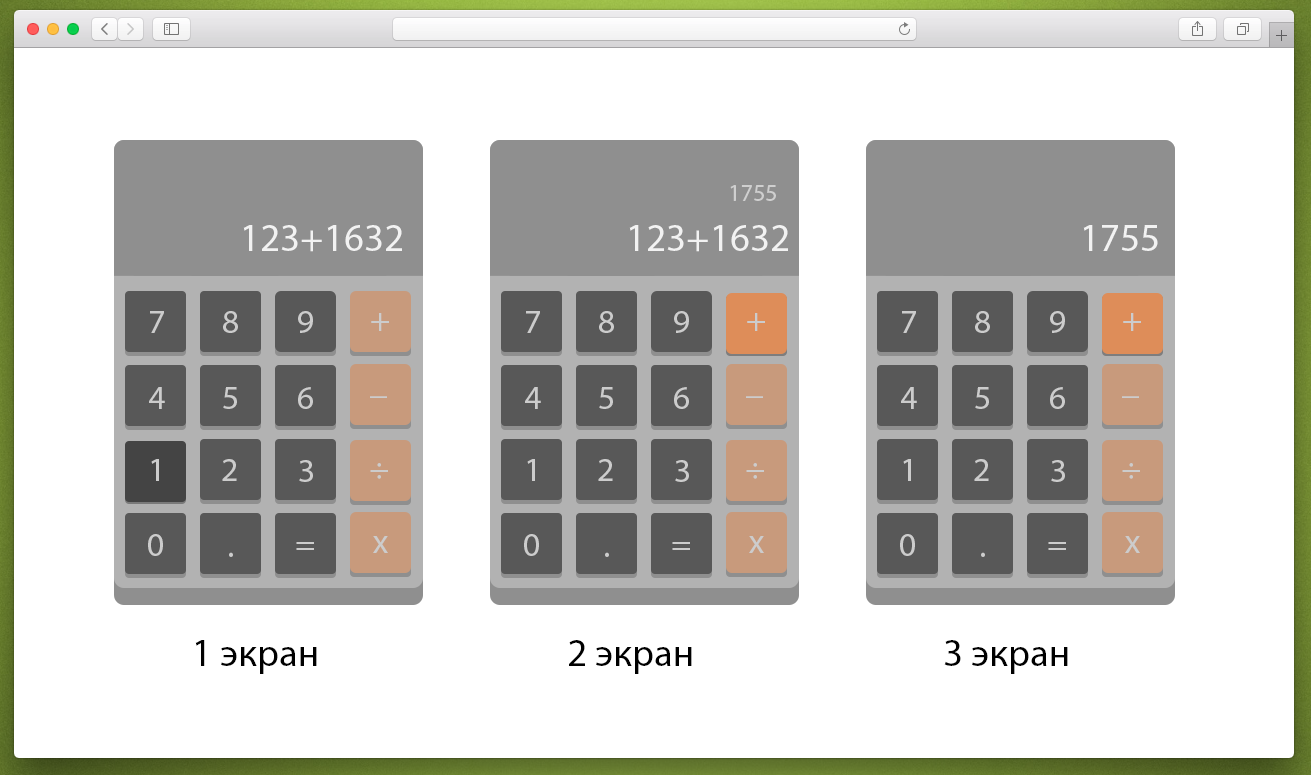
<style>
.page{position:relative;width:1311px;height:775px;background:#ffffff}
.page>*{position:absolute;margin:0}
.t1{font:24px "MyriadPro-Regular";color:#cfcfcf}
.t2{font:39px "MyriadPro-Regular";color:#f2f2f2}
.t3{font:34px "MyriadPro-Regular";color:#cccccc}
.t4{font:39px "MyriadPro-Regular";color:#000000}
</style>
<div class="page">
<p class="t1" style="left:730px;top:185px;width:46px;height:16px">1755</p>
<p class="t2" style="left:243px;top:225px;width:159px;height:27px">123+1632</p>
<p class="t2" style="left:629px;top:225px;width:159px;height:27px">123+1632</p>
<p class="t2" style="left:1083px;top:225px;width:75px;height:26px">1755</p>
<p class="t3" style="left:150px;top:311px;width:14px;height:22px">7</p>
<p class="t3" style="left:223px;top:311px;width:15px;height:22px">8</p>
<p class="t3" style="left:298px;top:311px;width:15px;height:22px">9</p>
<p class="t3" style="left:371px;top:313px;width:18px;height:18px">+</p>
<p class="t3" style="left:526px;top:311px;width:14px;height:22px">7</p>
<p class="t3" style="left:599px;top:311px;width:15px;height:22px">8</p>
<p class="t3" style="left:674px;top:311px;width:15px;height:22px">9</p>
<p class="t3" style="left:747px;top:313px;width:18px;height:18px">+</p>
<p class="t3" style="left:902px;top:311px;width:14px;height:22px">7</p>
<p class="t3" style="left:975px;top:311px;width:15px;height:22px">8</p>
<p class="t3" style="left:1050px;top:311px;width:15px;height:22px">9</p>
<p class="t3" style="left:1123px;top:313px;width:18px;height:18px">+</p>
<p class="t3" style="left:149px;top:387px;width:16px;height:22px">4</p>
<p class="t3" style="left:223px;top:387px;width:14px;height:22px">5</p>
<p class="t3" style="left:298px;top:387px;width:15px;height:22px">6</p>
<p class="t3" style="left:525px;top:387px;width:16px;height:22px">4</p>
<p class="t3" style="left:599px;top:387px;width:14px;height:22px">5</p>
<p class="t3" style="left:674px;top:387px;width:15px;height:22px">6</p>
<p class="t3" style="left:901px;top:387px;width:16px;height:22px">4</p>
<p class="t3" style="left:975px;top:387px;width:14px;height:22px">5</p>
<p class="t3" style="left:1050px;top:387px;width:15px;height:22px">6</p>
<p class="t3" style="left:370px;top:396px;width:17px;height:2px">_</p>
<p class="t3" style="left:746px;top:396px;width:17px;height:2px">_</p>
<p class="t3" style="left:1122px;top:396px;width:17px;height:2px">_</p>
<p class="t3" style="left:151px;top:459px;width:8px;height:22px">1</p>
<p class="t3" style="left:222px;top:459px;width:15px;height:22px">2</p>
<p class="t3" style="left:299px;top:460px;width:14px;height:22px">3</p>
<p class="t3" style="left:527px;top:459px;width:8px;height:22px">1</p>
<p class="t3" style="left:598px;top:459px;width:15px;height:22px">2</p>
<p class="t3" style="left:675px;top:460px;width:14px;height:22px">3</p>
<p class="t3" style="left:903px;top:459px;width:8px;height:22px">1</p>
<p class="t3" style="left:974px;top:459px;width:15px;height:22px">2</p>
<p class="t3" style="left:1051px;top:460px;width:14px;height:22px">3</p>
<p class="t3" style="left:370px;top:463px;width:18px;height:16px">÷</p>
<p class="t3" style="left:746px;top:463px;width:18px;height:16px">÷</p>
<p class="t3" style="left:1122px;top:463px;width:18px;height:16px">÷</p>
<p class="t3" style="left:148px;top:534px;width:15px;height:22px">0</p>
<p class="t3" style="left:524px;top:534px;width:15px;height:22px">0</p>
<p class="t3" style="left:900px;top:534px;width:15px;height:22px">0</p>
<p class="t3" style="left:296px;top:542px;width:18px;height:8px">=</p>
<p class="t3" style="left:373px;top:536px;width:15px;height:17px">х</p>
<p class="t3" style="left:672px;top:542px;width:18px;height:8px">=</p>
<p class="t3" style="left:749px;top:536px;width:15px;height:17px">х</p>
<p class="t3" style="left:1048px;top:542px;width:18px;height:8px">=</p>
<p class="t3" style="left:1125px;top:536px;width:15px;height:17px">х</p>
<p class="t3" style="left:229px;top:552px;width:4px;height:5px">.</p>
<p class="t3" style="left:605px;top:552px;width:4px;height:5px">.</p>
<p class="t3" style="left:981px;top:552px;width:4px;height:5px">.</p>
<p class="t4" style="left:195px;top:640px;width:122px;height:34px">1 экран</p>
<p class="t4" style="left:569px;top:640px;width:123px;height:34px">2 экран</p>
<p class="t4" style="left:944px;top:640px;width:124px;height:34px">3 экран</p>
</div>
